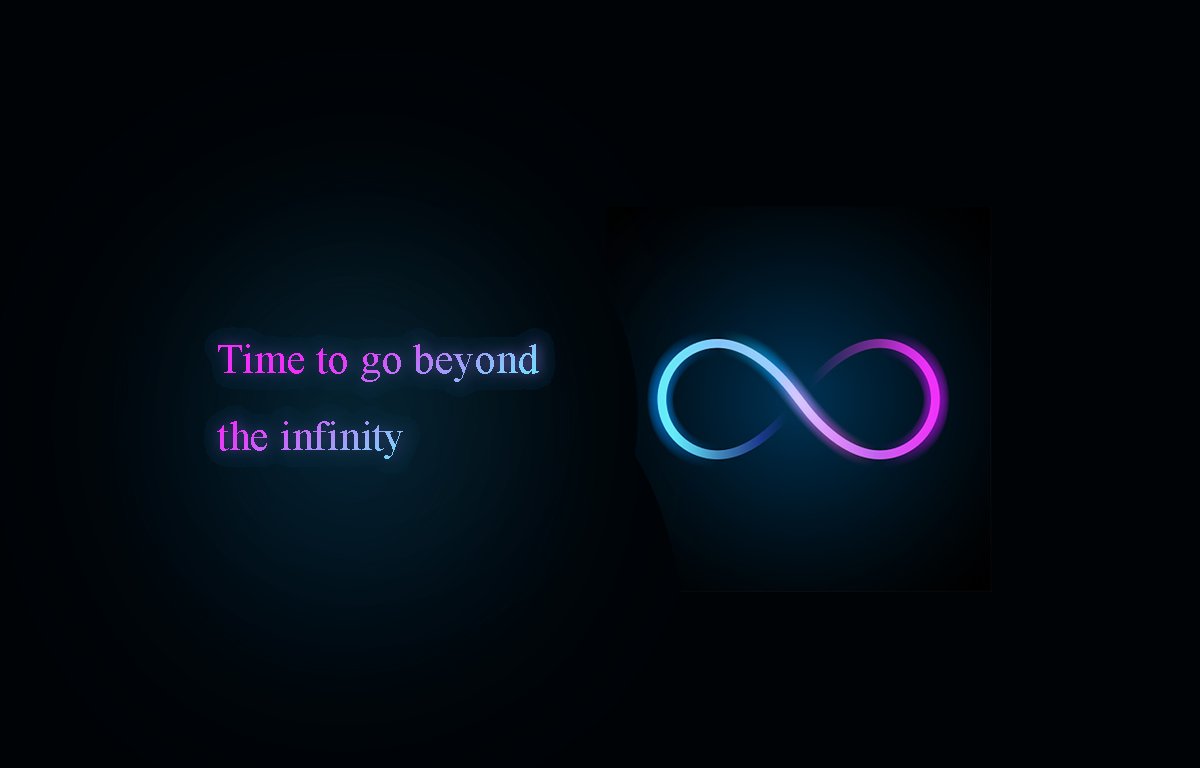
<style>
.page{position:relative;width:1200px;height:768px;background:#000306}
.page>*{position:absolute;margin:0}
.t1{font:42.5px/77.2px "TimesNewRomanPSMT";letter-spacing:0.002em}
</style>
<div class="page">
<p class="t1" style="left:217px;top:344px;width:322px;height:115px">Time to go beyond the infinity</p>
</div>
